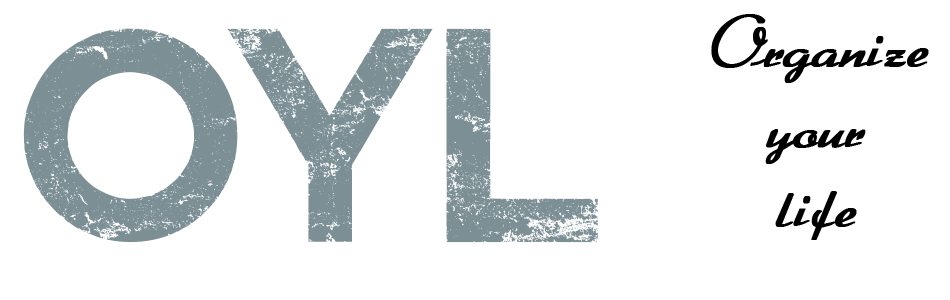
<style>
.page{position:relative;width:950px;height:300px;background:#ffffff}
.page>*{position:absolute;margin:0}
.t1{font:66.7px "Arabella";color:#000000;font-weight:bold}
.t2{font:287.5px "REVOLUTIONII";color:#7c8f96}
</style>
<div class="page">
<p class="t1" style="left:711px;top:14px;width:218px;height:226px;text-align:center">Organize <br>your<br>life</p>
<p class="t2" style="left:23px;top:28px;width:575px;height:215px">OYL</p>
</div>
